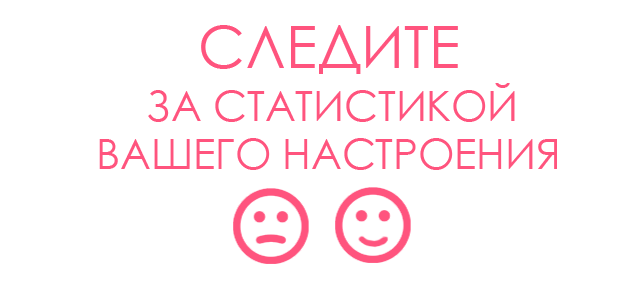
<style>
.page{position:relative;width:644px;height:305px;background:#ffffff}
.page>*{position:absolute;margin:0}
.t1{font:58.3px "CenturyGothic";color:#ff547e}
.t2{font:41.7px "CenturyGothic";color:#ff547e}
</style>
<div class="page">
<p class="t1" style="left:201px;top:25px;width:257px;height:49px">СЛЕДИТЕ</p>
<p class="t2" style="left:148px;top:83px;width:367px;height:39px">ЗА СТАТИСТИКОЙ</p>
<p class="t2" style="left:99px;top:138px;width:458px;height:32px">ВАШЕГО НАСТРОЕНИЯ</p>
</div>
